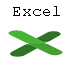
<style>
.page{position:relative;width:71px;height:58px;background:#ffffff}
.page>*{position:absolute;margin:0}
.t1{font:12px "CourierNewPSMT";color:#000000}
</style>
<div class="page">
<p class="t1" style="left:13px;top:6px;width:47px;height:10px">Excel</p>
</div>
